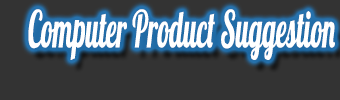
<style>
.page{position:relative;width:340px;height:100px;background:#333333}
.page>*{position:absolute;margin:0}
.t1{font:50.7px "UVFLobster12";color:#ffffff;scale:0.53 1}
</style>
<div class="page">
<p class="t1" style="left:28px;top:9px;width:307px;height:51px">Computer Product Suggestion</p>
</div>
